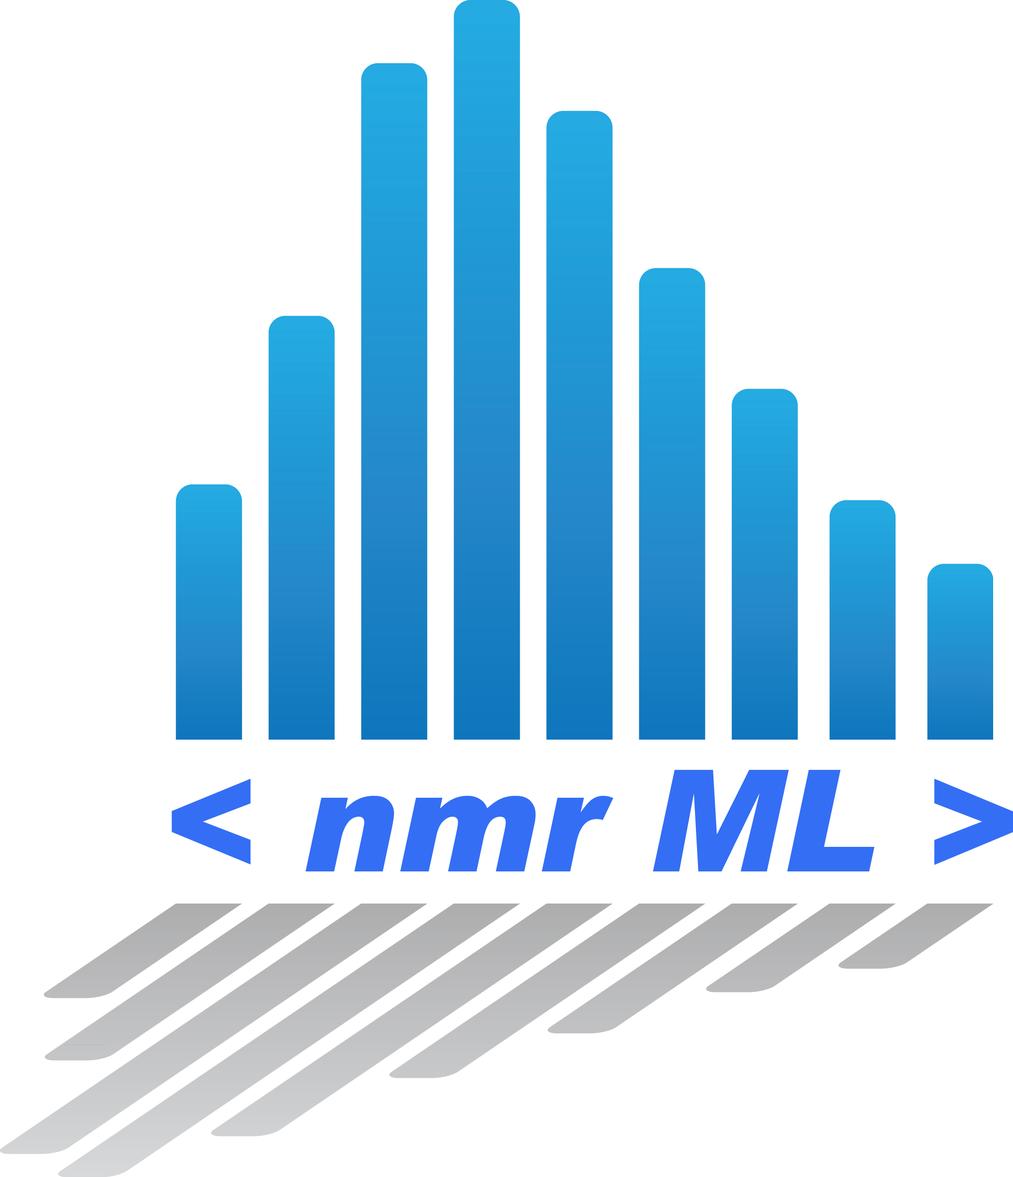
<style>
.page{position:relative;width:1013px;height:1177px;background:#ffffff}
.page>*{position:absolute;margin:0}
.t1{font:141.7px "Arial-BlackItalic";color:#336ef5}
</style>
<div class="page">
<p class="t1" style="left:171px;top:770px;width:842px;height:102px">&lt; nmr ML &gt;</p>
</div>
